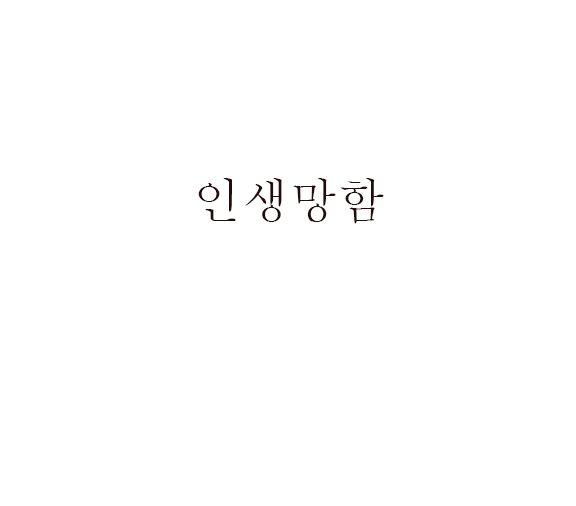
<style>
.page{position:relative;width:576px;height:506px;background:#ffffff}
.page>*{position:absolute;margin:0}
.t1{font:48px "Batang";color:#250c0c}
</style>
<div class="page">
<p class="t1" style="left:198px;top:178px;width:186px;height:46px">인생망함</p>
</div>
